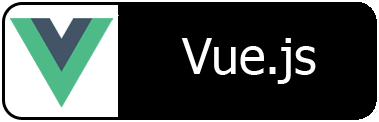
<style>
.page{position:relative;width:379px;height:122px;background:#000000}
.page>*{position:absolute;margin:0}
.t1{font:50px "Tahoma";color:#ffffff}
</style>
<div class="page">
<p class="t1" style="left:181px;top:38px;width:135px;height:46px">Vue.js</p>
</div>
